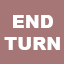
<style>
.page{position:relative;width:64px;height:64px;background:#a67575}
.page>*{position:absolute;margin:0}
.t1{font:18px "Arial-Black";color:#ffffff}
</style>
<div class="page">
<p class="t1" style="left:4px;top:15px;width:56px;height:35px;text-align:center">END<br>TURN</p>
</div>
